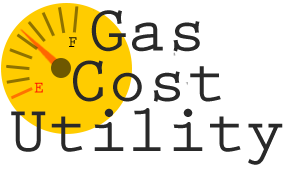
<style>
.page{position:relative;width:293px;height:170px;background:#ffffff}
.page>*{position:absolute;margin:0}
.t1{font:65.7px/50.2px "PrestigeEliteStd-Bd";color:#292929}
.t2{font:16.3px "PrestigeEliteStd-Bd";color:#000000}
.t3{font:16.3px "PrestigeEliteStd-Bd"}
</style>
<div class="page">
<p class="t1" style="left:11px;top:10px;width:272px;height:155px;text-align:center">Gas<br>Cost<br>Utility</p>
<p class="t2" style="left:69px;top:37px;width:8px;height:10px">F</p>
<p class="t3" style="left:34px;top:82px;width:9px;height:11px">E</p>
</div>
